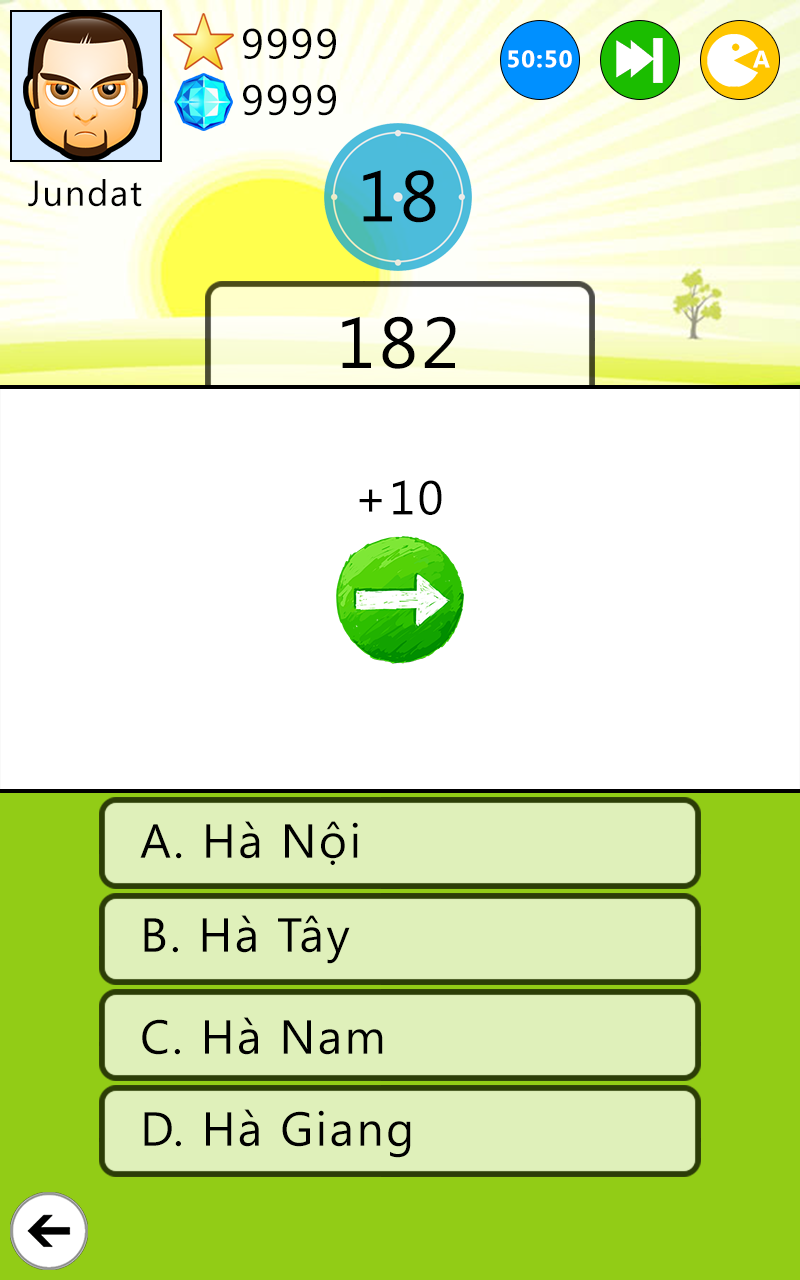
<style>
.page{position:relative;width:800px;height:1280px;background:#ffffff}
.page>*{position:absolute;margin:0}
.t1{font:42px "SegoeUI";letter-spacing:0.05em;color:#000000}
.t2{font:72px "SegoeUI";letter-spacing:0.05em;color:#000000}
.t3{font:36px "SegoeUI";letter-spacing:0.05em;color:#000000}
.t4{font:48px "SegoeUI";letter-spacing:0.05em;color:#000000}
</style>
<div class="page">
<p class="t1" style="left:243px;top:28px;width:93px;height:31px">9999</p>
<p class="t1" style="left:243px;top:84px;width:93px;height:32px">9999</p>
<p class="t2" style="left:363px;top:170px;width:73px;height:53px">18</p>
<p class="t3" style="left:28px;top:179px;width:114px;height:28px">Jundat</p>
<p class="t2" style="left:342px;top:316px;width:114px;height:53px">182</p>
<p class="t4" style="left:359px;top:480px;width:83px;height:35px">+10</p>
<p class="t4" style="left:140px;top:821px;width:218px;height:44px">A. Hà Nội</p>
<p class="t4" style="left:144px;top:915px;width:206px;height:49px">B. Hà Tây</p>
<p class="t4" style="left:142px;top:1017px;width:241px;height:38px">C. Hà Nam</p>
<p class="t4" style="left:144px;top:1109px;width:267px;height:49px">D. Hà Giang</p>
</div>
